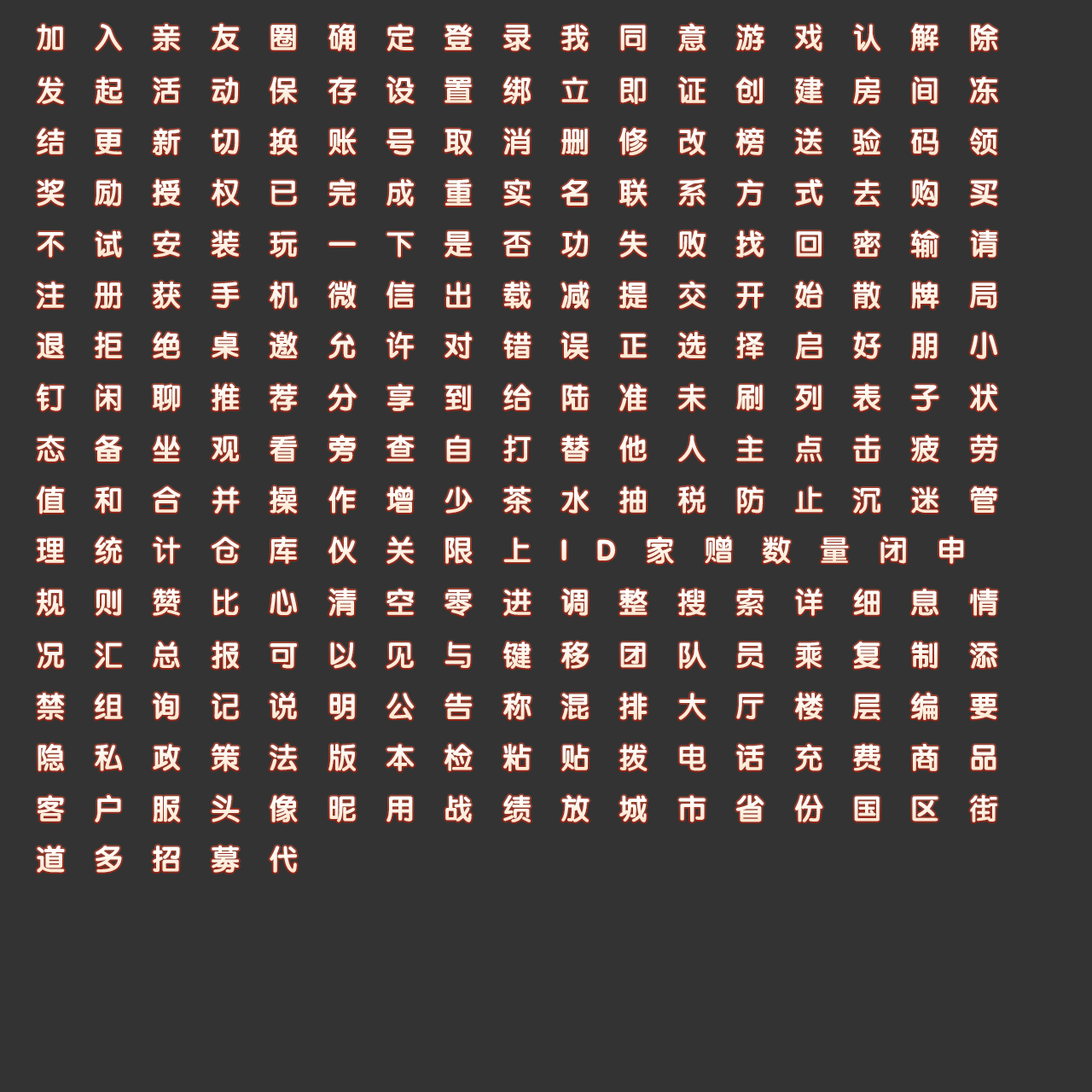
<style>
.page{position:relative;width:1092px;height:1092px;background:#333333}
.page>*{position:absolute;margin:0}
.t1{font:29px "FZY4JW--GB1-0";letter-spacing:1em;color:#fff4e9}
.t2{font:29px "FZY4JW--GB1-0";letter-spacing:1em;color:#fff3e7}
</style>
<div class="page">
<p class="t1" style="left:37px;top:23px;width:961px;height:28px">加入亲友圈确定登录我同意游戏认解除</p>
<p class="t1" style="left:37px;top:76px;width:961px;height:28px">发起活动保存设置绑立即证创建房间冻</p>
<p class="t1" style="left:37px;top:127px;width:960px;height:28px">结更新切换账号取消删修改榜送验码领</p>
<p class="t1" style="left:37px;top:178px;width:960px;height:28px">奖励授权已完成重实名联系方式去购买</p>
<p class="t1" style="left:38px;top:229px;width:959px;height:29px">不试安装玩一下是否功失败找回密输请</p>
<p class="t1" style="left:37px;top:281px;width:960px;height:28px">注册获手机微信出载减提交开始散牌局</p>
<p class="t2" style="left:37px;top:331px;width:960px;height:29px">退拒绝桌邀允许对错误正选择启好朋小</p>
<p class="t1" style="left:37px;top:383px;width:960px;height:28px">钉闲聊推荐分享到给陆准未刷列表子状</p>
<p class="t1" style="left:37px;top:434px;width:960px;height:28px">态备坐观看旁查自打替他人主点击疲劳</p>
<p class="t1" style="left:37px;top:486px;width:960px;height:28px">值和合并操作增少茶水抽税防止沉迷管</p>
<p class="t1" style="left:36px;top:536px;width:928px;height:28px">理统计仓库伙关限上ID家赠数量闭申</p>
<p class="t1" style="left:37px;top:588px;width:961px;height:28px">规则赞比心清空零进调整搜索详细息情</p>
<p class="t1" style="left:38px;top:641px;width:959px;height:28px">况汇总报可以见与键移团队员乘复制添</p>
<p class="t1" style="left:37px;top:692px;width:960px;height:28px">禁组询记说明公告称混排大厅楼层编要</p>
<p class="t1" style="left:38px;top:744px;width:958px;height:28px">隐私政策法版本检粘贴拨电话充费商品</p>
<p class="t1" style="left:38px;top:794px;width:959px;height:28px">客户服头像昵用战绩放城市省份国区街</p>
<p class="t1" style="left:37px;top:845px;width:260px;height:28px">道多招募代</p>
</div>
